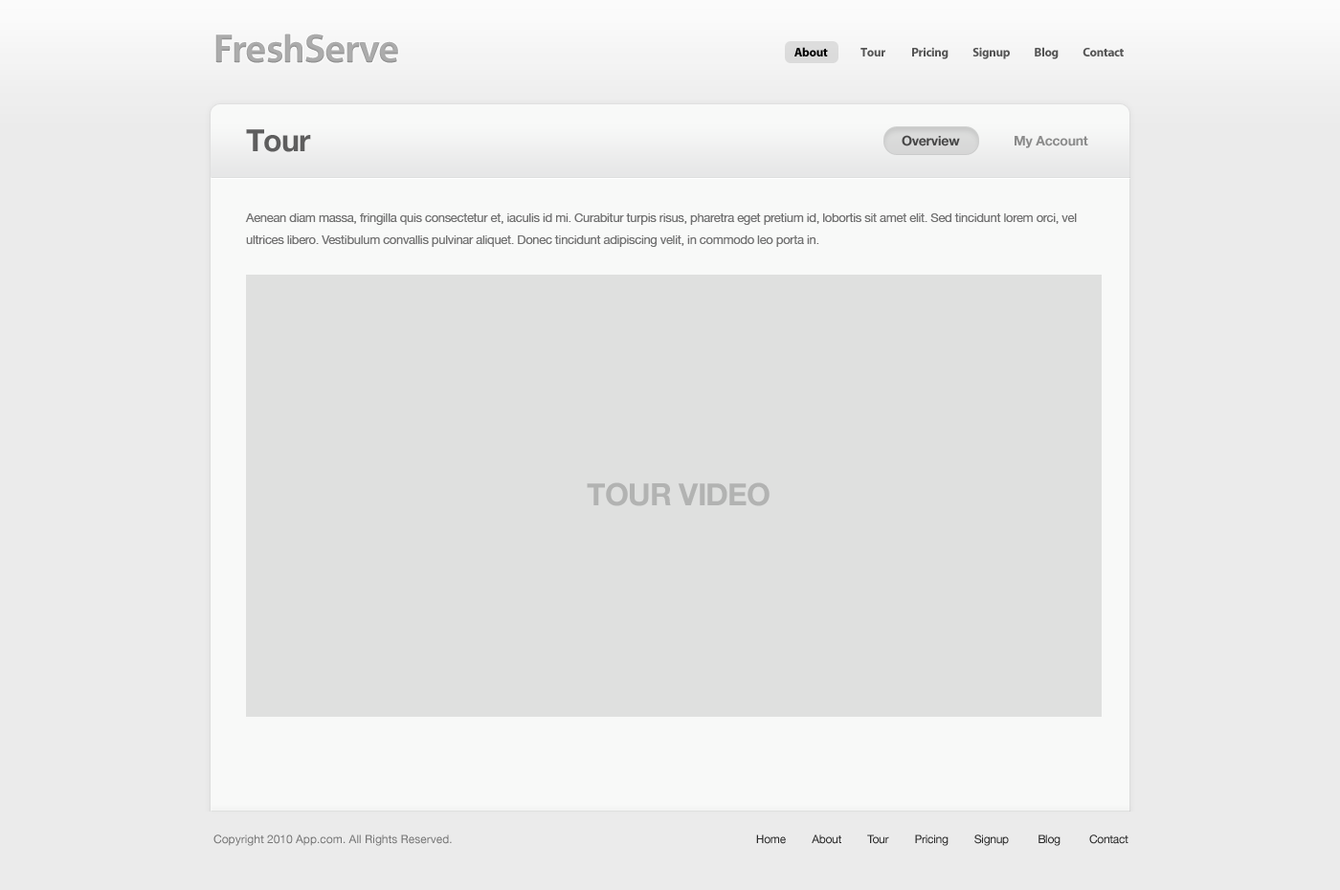
<style>
.page{position:relative;width:1340px;height:890px;background:#ebebeb}
.page>*{position:absolute;margin:0}
.t1{font:38.3px "Aller-Bold";letter-spacing:-0.025em;color:#acacac}
.t2{font:12.4px "MyriadPro-Bold";letter-spacing:-0.025em;color:#555555}
.t3{font:12.4px "MyriadPro-Bold";letter-spacing:-0.025em;color:#000000}
.t4{font:30.6px "HelveticaNeue-Bold";letter-spacing:-0.025em;color:#5e5e5e}
.t5{font:13.4px "HelveticaNeue-Bold";letter-spacing:-0.015em;color:#464646}
.t6{font:13.4px "HelveticaNeue-Bold";letter-spacing:-0.015em;color:#8b8b8b}
.t7{font:12.4px/22px "HelveticaNeue";letter-spacing:-0.025em;color:#707070}
.t8{font:30.6px "HelveticaNeue-Bold";letter-spacing:-0.025em;color:#b2b3b2}
.t9{font:11.5px "HelveticaNeue";color:#757575}
.t10{font:11.5px "HelveticaNeue";letter-spacing:-0.025em;color:#2a2a2a}
</style>
<div class="page">
<p class="t1" style="left:215px;top:33px;width:183px;height:30px">FreshServe</p>
<p class="t2" style="left:794px;top:47px;width:330px;height:12px"><span class="t3">About               </span>Tour            Pricing           Signup           Blog           Contact</p>
<p class="t4" style="left:246px;top:129px;width:65px;height:23px">Tour</p>
<p class="t5" style="left:901px;top:135px;width:59px;height:11px">Overview</p>
<p class="t6" style="left:1014px;top:136px;width:74px;height:12px">My Account</p>
<p class="t7" style="left:245px;top:213px;width:832px;height:34px">Aenean diam massa, fringilla quis consectetur et, iaculis id mi. Curabitur turpis risus, pharetra eget pretium id, lobortis sit amet elit. Sed tincidunt lorem orci, vel ultrices libero. Vestibulum convallis pulvinar aliquet. Donec tincidunt adipiscing velit, in commodo leo porta in.</p>
<p class="t8" style="left:587px;top:482px;width:182px;height:24px">TOUR VIDEO</p>
<p class="t9" style="left:213px;top:835px;width:239px;height:11px">Copyright 2010 App.com. All Rights Reserved.</p>
<p class="t10" style="left:756px;top:835px;width:372px;height:11px">Home         About         Tour         Pricing         Signup          Blog          Contact</p>
</div>
